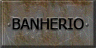
<style>
.page{position:relative;width:96px;height:48px}
.page>*{position:absolute;margin:0}
.t1{font:14.7px "Tahoma";letter-spacing:-0.01em;color:#000000;text-transform:uppercase;font-weight:bold}
</style>
<div class="page">
<p class="t1" style="left:12px;top:18px;width:72px;height:12px">Banherio</p>
</div>
